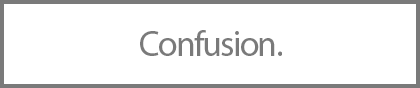
<style>
.page{position:relative;width:420px;height:88px;background:#ffffff}
.page>*{position:absolute;margin:0}
.t1{font:36px "MyriadPro-Regular";letter-spacing:-0.05em;color:#7a7a7a}
</style>
<div class="page">
<p class="t1" style="left:140px;top:30px;width:142px;height:26px">Confusion.</p>
</div>
